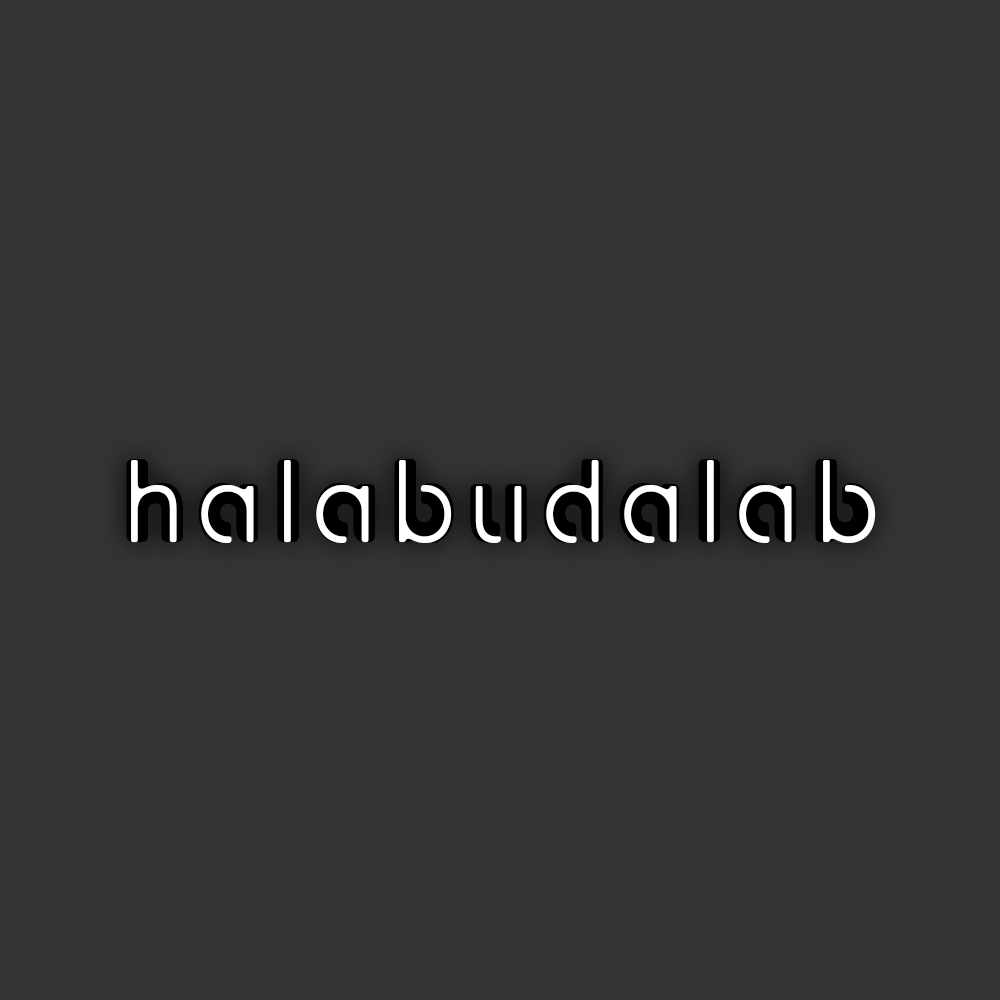
<style>
.page{position:relative;width:1000px;height:1000px;background:#333333}
.page>*{position:absolute;margin:0}
.t1{font:111px "AquawaxSpaceFxTrial-Light";letter-spacing:0.1em;color:#ffffff}
</style>
<div class="page">
<p class="t1" style="left:131px;top:460px;width:745px;height:83px">halabudalab</p>
</div>
